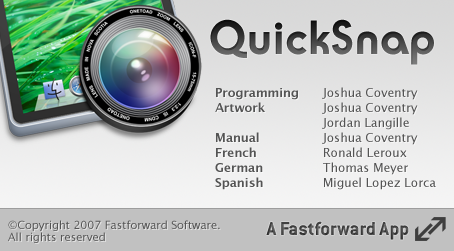
<style>
.page{position:relative;width:454px;height:251px}
.page>*{position:absolute;margin:0}
.t1{font:47px "RondaITCbyBT-Bold"}
.t2{font:12px/15px "LucidaGrande";color:#545454}
.t3{font:12px/15px "LucidaGrande-Bold";color:#545454}
.t4{font:11px/12px "LucidaGrande";color:#545454}
.t5{font:21px "ConduitITC-Bold";color:#454545}
</style>
<div class="page">
<p class="t1" style="left:210px;top:19px;width:224px;height:46px">QuickSnap</p>
<p class="t2" style="left:215px;top:87px;width:221px;height:103px"><span class="t3">Programming</span> Joshua Coventry<br><span class="t3">Artwork</span>  Joshua Coventry<br>   Jordan Langille<br><span class="t3">Manual</span>  Joshua Coventry<br><span class="t3">French</span>  Ronald Leroux<br><span class="t3">German</span>  Thomas Meyer<br><span class="t3">Spanish</span>  Miguel Lopez Lorca</p>
<p class="t4" style="left:8px;top:220px;width:212px;height:23px">©Copyright 2007 Fastforward Software. <br>All rights reserved</p>
<p class="t5" style="left:266px;top:221px;width:143px;height:19px">A Fastforward App</p>
</div>
